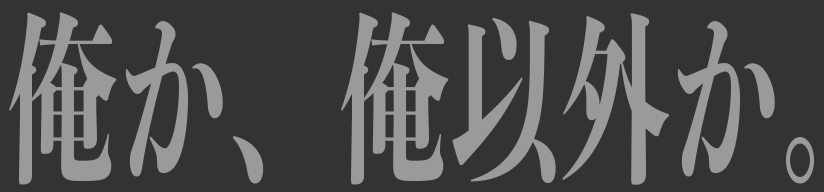
<style>
.page{position:relative;width:824px;height:192px;background:#333333}
.page>*{position:absolute;margin:0}
.t1{font:182.3px "ToppanBunkyuMidashiMinchoStdN-ExtraBold";color:#9a9a9a;scale:0.61 1}
</style>
<div class="page">
<p class="t1" style="left:9px;top:12px;width:805px;height:173px">俺か、俺以外か。</p>
</div>
